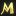
<style>
.page{position:relative;width:16px;height:16px}
.page>*{position:absolute;margin:0}
.t1{font:13px "Jokerman-Regular"}
</style>
<div class="page">
<p class="t1" style="left:0px;top:2px;width:14px;height:13px">M</p>
</div>
